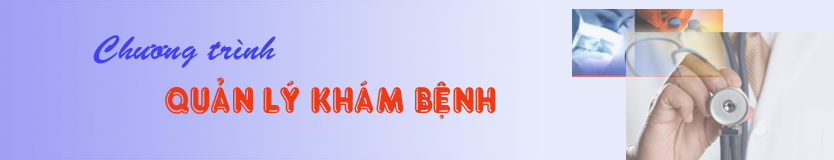
<style>
.page{position:relative;width:834px;height:160px}
.page>*{position:absolute;margin:0}
.t1{font:34.3px "VNI-Brush-Italic";color:#4141f1}
.t2{font:34.3px "VNI-Fato";color:#f03915;scale:0.91 1}
</style>
<div class="page">
<p class="t1" style="left:93px;top:35px;width:183px;height:33px">Chöông trình</p>
<p class="t2" style="left:165px;top:77px;width:331px;height:42px">QUAÛN LYÙ KHAÙM BEÄNH</p>
</div>
